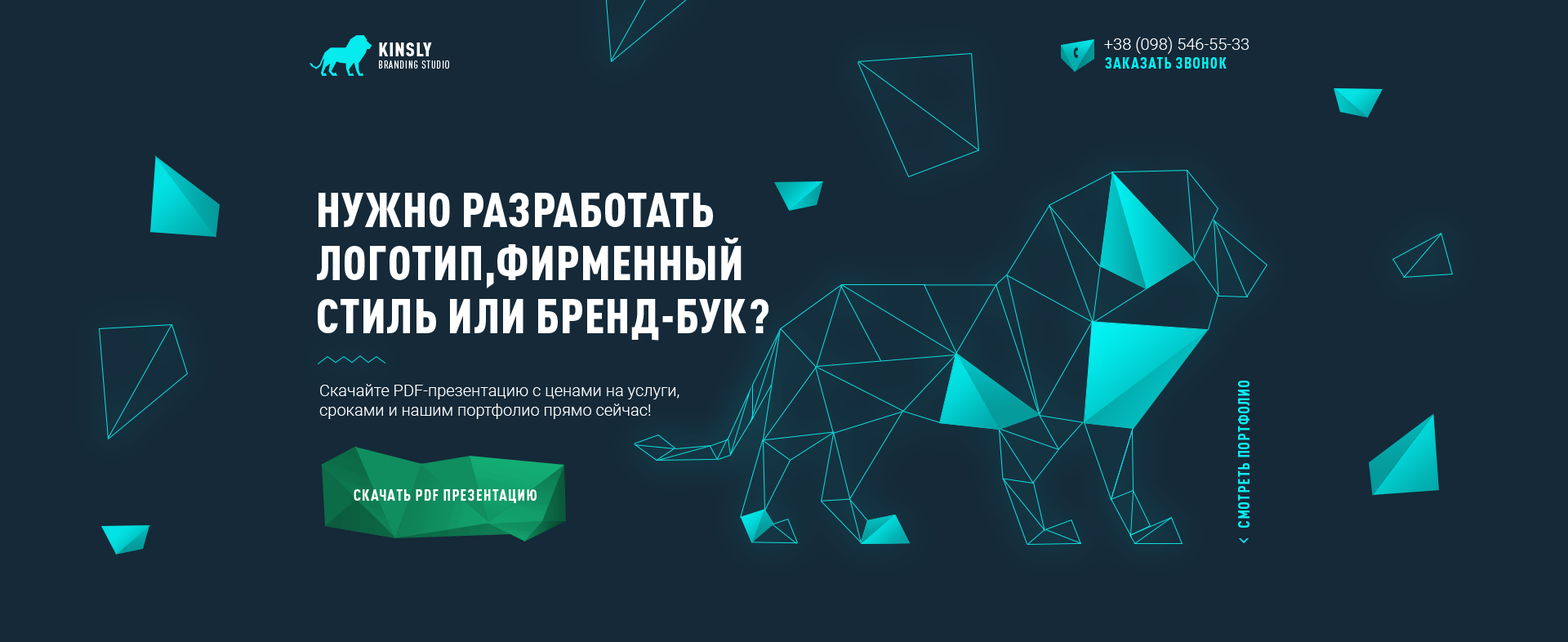
<style>
.page{position:relative;width:1568px;height:642px;background:#152938}
.page>*{position:absolute;margin:0}
.t1{font:16.3px "Roboto-Light";color:#ffffff}
.t2{font:19.6px "DINPro-CondensedBlack";letter-spacing:0.04em;color:#ffffff}
.t3{font:10.6px "DINPro-CondensedRegular";letter-spacing:0.08em;color:#ffffff}
.t4{font:15.5px "DINPro-CondensedBlack";letter-spacing:0.04em;color:#02f1f3;text-transform:uppercase}
.t5{font:48.2px/53.1px "DINPro-CondensedBlack";letter-spacing:0.02em;color:#ffffff}
.t6{font:15.7px "DINPro-CondensedBlack";letter-spacing:0.04em;color:#0debf3;text-transform:uppercase}
.t7{font:15.5px "DINPro-CondensedBlack";letter-spacing:0.04em;color:#ffffff;text-transform:uppercase}
</style>
<div class="page">
<p class="t1" style="left:1104px;top:37px;width:145px;height:17px">+38 (098) 546-55-33</p>
<p class="t2" style="left:379px;top:42px;width:53px;height:14px">KINSLY</p>
<p class="t3" style="left:379px;top:60px;width:70px;height:9px">BRANDING STUDIO</p>
<p class="t4" style="left:1105px;top:57px;width:122px;height:12px">Заказать звонок</p>
<p class="t5" style="left:317px;top:193px;width:451px;height:148px">НУЖНО РАЗРАБОТАТЬ <br>ЛОГОТИП,ФИРМЕННЫЙ <br>СТИЛЬ ИЛИ БРЕНД-БУК?</p>
<p class="t1" style="left:319px;top:384px;width:360px;height:35px">Скачайте PDF-презентацию с ценами на услуги, <br>сроками и нашим портфолио прямо сейчас!</p>
<p class="t6" style="left:1238px;top:381px;width:12px;height:147px;rotate:-90deg">Смотреть портфолио</p>
<p class="t7" style="left:354px;top:489px;width:183px;height:14px">СКАчать PDF презентацию</p>
</div>
